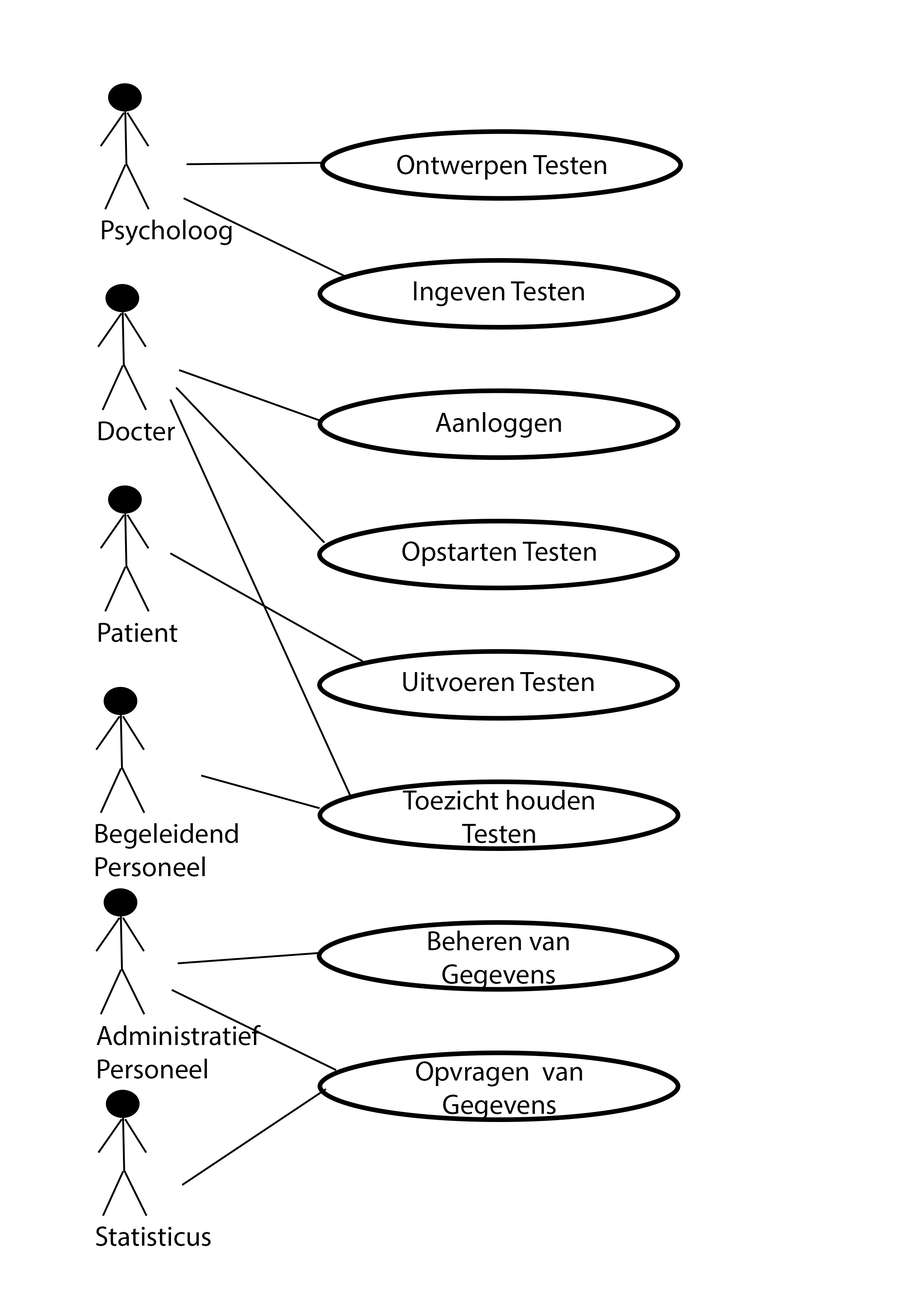
<style>
.page{position:relative;width:918px;height:1299px;background:#ffffff}
.page>*{position:absolute;margin:0}
.t1{font:27.8px "MyriadPro-Regular";color:#000000}
</style>
<div class="page">
<p class="t1" style="left:397px;top:155px;width:209px;height:25px">Ontwerpen Testen</p>
<p class="t1" style="left:102px;top:220px;width:130px;height:25px">Psycholoog</p>
<p class="t1" style="left:414px;top:281px;width:170px;height:25px">Ingeven Testen</p>
<p class="t1" style="left:436px;top:412px;width:125px;height:26px">Aanloggen</p>
<p class="t1" style="left:98px;top:421px;width:77px;height:20px">Docter</p>
<p class="t1" style="left:402px;top:541px;width:194px;height:25px">Opstarten Testen</p>
<p class="t1" style="left:98px;top:623px;width:79px;height:19px">Patient</p>
<p class="t1" style="left:403px;top:672px;width:191px;height:19px">Uitvoeren Testen</p>
<p class="t1" style="left:403px;top:790px;width:191px;height:53px;text-align:center">Toezicht houden<br>Testen</p>
<p class="t1" style="left:96px;top:823px;width:142px;height:53px">Begeleidend<br>Personeel</p>
<p class="t1" style="left:428px;top:930px;width:141px;height:59px;text-align:center">Beheren van<br>Gegevens</p>
<p class="t1" style="left:97px;top:1025px;width:164px;height:53px">Administratief <br>Personeel</p>
<p class="t1" style="left:416px;top:1061px;width:166px;height:59px;text-align:center">Opvragen  van<br>Gegevens</p>
<p class="t1" style="left:96px;top:1226px;width:115px;height:20px">Statisticus</p>
</div>
